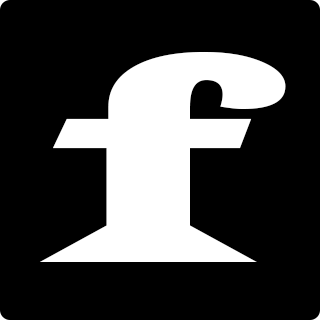
<style>
.page{position:relative;width:320px;height:320px;background:#000000}
.page>*{position:absolute;margin:0}
.t1{font:300px "LatinWide";color:#ffffff}
</style>
<div class="page">
<p class="t1" style="left:39px;top:51px;width:247px;height:211px">f</p>
</div>
